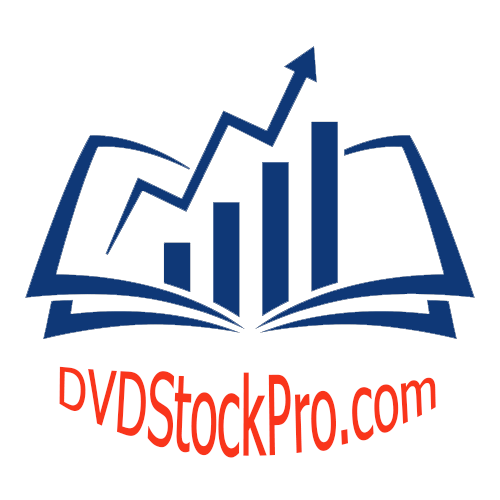
<style>
.page{position:relative;width:500px;height:500px;background:#ffffff}
.page>*{position:absolute;margin:0}
.t1{font:48px "Tahoma";color:#f9351b}
</style>
<div class="page">
<p class="t1" style="left:59px;top:366px;width:377px;height:92px">DVDStockPro.com</p>
</div>
